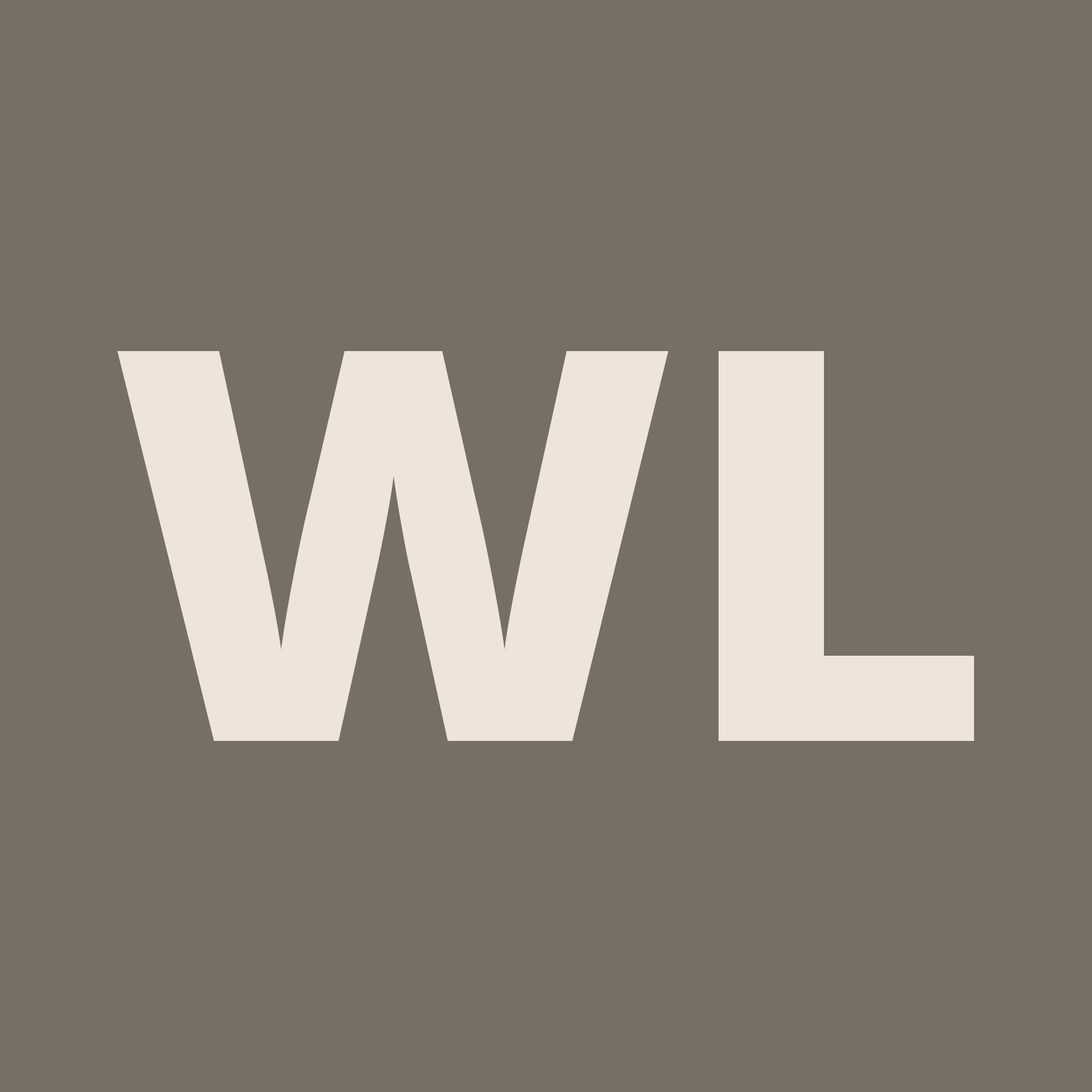
<style>
.page{position:relative;width:1092px;height:1092px;background:#776f65}
.page>*{position:absolute;margin:0}
.t1{font:546px "OpenSans-Extrabold";color:#eee4da}
</style>
<div class="page">
<p class="t1" style="left:117px;top:351px;width:857px;height:390px">WL</p>
</div>
